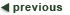
<style>
.page{position:relative;width:70px;height:15px;background:#ffffff}
.page>*{position:absolute;margin:0}
.t1{font:11px "Arial-BoldMT";letter-spacing:0.05em;color:#28452a}
</style>
<div class="page">
<p class="t1" style="left:13px;top:3px;width:50px;height:10px">previous</p>
</div>
